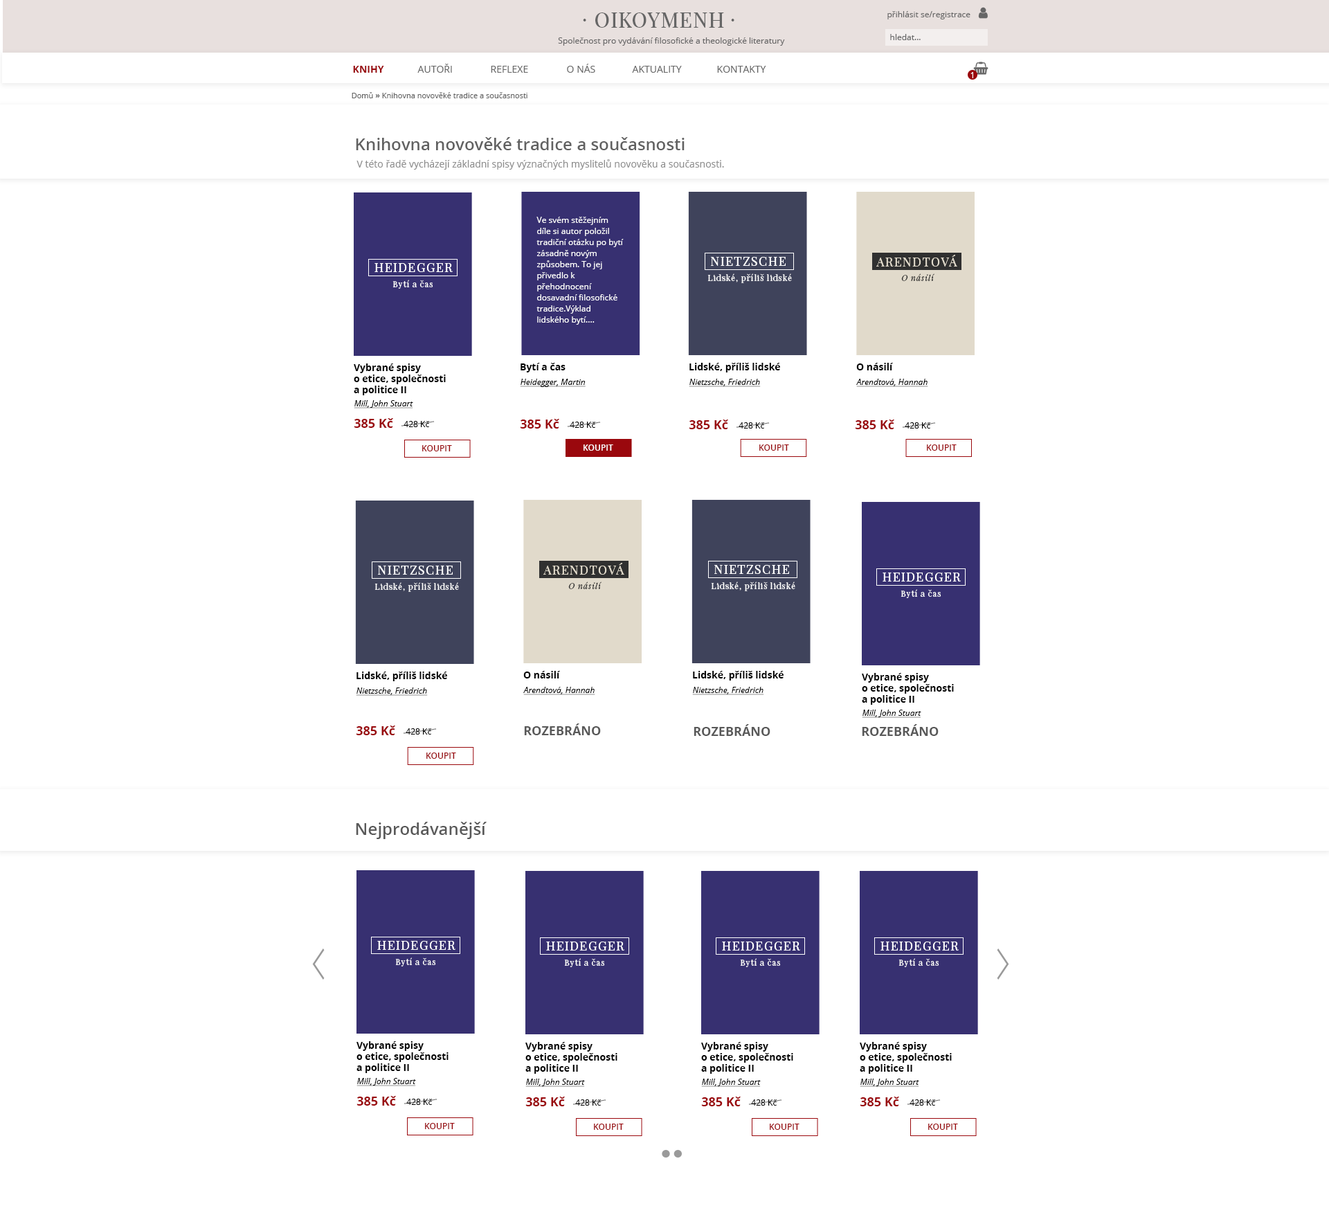
<style>
.page{position:relative;width:1329px;height:1215px;background:#ffffff}
.page>*{position:absolute;margin:0}
.t1{font:20.8px "PlayfairDisplay-Regular";letter-spacing:0.04em;color:#666666}
.t2{font:8.3px "OpenSans";color:#666666}
.t3{font:20.8px "PlayfairDisplaySC-Regular";letter-spacing:0.04em;color:#666666}
.t4{font:9.7px "OpenSans-Bold";color:#9a080d;text-transform:uppercase}
.t5{font:9.7px "OpenSans";color:#666666;text-transform:uppercase}
.t6{font:8.3px "OpenSans";color:#ffffff}
.t7{font:7.6px "OpenSans";color:#616161}
.t8{font:7.6px "OpenSans-Bold";color:#616161}
.t9{font:16.6px "OpenSans-Semibold";color:#616161}
.t10{font:9.7px "OpenSans";color:#8e8e8e}
.t11{font:8.3px/11.1px "OpenSans";color:#ffffff}
.t12{font:12.5px "PlayfairDisplay-Regular";letter-spacing:0.075em;color:#ffffff;text-transform:uppercase}
.t13{font:12.5px "PlayfairDisplay-Regular";letter-spacing:0.075em;color:#e1dacb;text-transform:uppercase}
.t14{font:8.3px "PlayfairDisplay-Regular";letter-spacing:0.075em;color:#ffffff}
.t15{font:8.3px "PlayfairDisplay-Italic";letter-spacing:0.075em;color:#303030}
.t16{font:9.7px/11.1px "OpenSans-Bold";color:#000000}
.t17{font:9.7px "OpenSans-Bold";color:#000000}
.t18{font:8.3px "OpenSans-Italic";color:#000000;text-decoration:underline}
.t19{font:12.5px "OpenSans-Bold";color:#9a080d}
.t20{font:8.3px "OpenSans";color:#000000}
.t21{font:8.3px "OpenSans-Semibold";color:#9a080d;text-transform:uppercase}
.t22{font:8.3px "OpenSans-Semibold";color:#ffffff;text-transform:uppercase}
.t23{font:12.5px "OpenSans-Bold";color:#595959}
.t24{font:16.6px "OpenSans-Semibold";color:#595959}
</style>
<div class="page">
<p class="t1" style="left:595px;top:12px;width:129px;height:16px">OIKOYMENH</p>
<p class="t2" style="left:888px;top:11px;width:83px;height:8px">přihlásit se/registrace</p>
<p class="t3" style="left:583px;top:19px;width:3px;height:2px">·</p>
<p class="t3" style="left:731px;top:19px;width:4px;height:2px">·</p>
<p class="t2" style="left:558px;top:37px;width:227px;height:9px">Společnost pro vydávání filosofické a theologické literatury</p>
<p class="t2" style="left:890px;top:34px;width:31px;height:6px">hledat...</p>
<p class="t4" style="left:353px;top:66px;width:31px;height:7px">Knihy</p>
<p class="t5" style="left:417px;top:64px;width:35px;height:9px">autoři</p>
<p class="t5" style="left:491px;top:66px;width:37px;height:7px">reflexe</p>
<p class="t5" style="left:567px;top:64px;width:28px;height:9px">o nás</p>
<p class="t5" style="left:632px;top:66px;width:50px;height:7px">Aktuality</p>
<p class="t5" style="left:717px;top:66px;width:49px;height:7px">kontakty</p>
<p class="t6" style="left:971px;top:72px;width:2px;height:6px">1</p>
<p class="t7" style="left:352px;top:92px;width:176px;height:6px">Domů <span class="t8">»</span> Knihovna novověké tradice a současnosti</p>
<p class="t9" style="left:356px;top:137px;width:329px;height:13px">Knihovna novověké tradice a současnosti</p>
<p class="t10" style="left:357px;top:159px;width:367px;height:11px">V této řadě vycházejí základní spisy význačných myslitelů novověku a současnosti.</p>
<p class="t11" style="left:537px;top:217px;width:87px;height:108px">Ve svém stěžejním díle si autor položil tradiční otázku po bytí zásadně novým způsobem. To jej přivedlo k přehodnocení dosavadní filosofické tradice.Výklad lidského bytí....</p>
<p class="t12" style="left:711px;top:257px;width:75px;height:9px">Nietzsche</p>
<p class="t13" style="left:876px;top:255px;width:81px;height:12px">Arendtová</p>
<p class="t12" style="left:375px;top:263px;width:78px;height:9px">Heidegger</p>
<p class="t14" style="left:393px;top:280px;width:40px;height:9px">Bytí a čas</p>
<p class="t14" style="left:708px;top:273px;width:84px;height:10px">Lidské, příliš lidské</p>
<p class="t15" style="left:901px;top:273px;width:34px;height:8px">O násilí</p>
<p class="t16" style="left:354px;top:363px;width:92px;height:32px">Vybrané spisy <br>o etice, společnosti <br>a politice II</p>
<p class="t17" style="left:521px;top:363px;width:45px;height:9px">Bytí a čas</p>
<p class="t17" style="left:690px;top:363px;width:90px;height:9px">Lidské, příliš lidské</p>
<p class="t17" style="left:856px;top:363px;width:38px;height:7px">O násilí</p>
<p class="t18" style="left:520px;top:379px;width:66px;height:8px">Heidegger, Martin</p>
<p class="t18" style="left:689px;top:379px;width:72px;height:8px">Nietzsche, Friedrich</p>
<p class="t18" style="left:856px;top:379px;width:72px;height:8px">Arendtová, Hannah</p>
<p class="t18" style="left:354px;top:400px;width:59px;height:8px">Mill, John Stuart</p>
<p class="t19" style="left:354px;top:418px;width:39px;height:10px">385 Kč</p>
<p class="t20" style="left:404px;top:421px;width:26px;height:6px">428 Kč</p>
<p class="t19" style="left:520px;top:419px;width:39px;height:10px">385 Kč</p>
<p class="t20" style="left:570px;top:422px;width:26px;height:6px">428 Kč</p>
<p class="t19" style="left:689px;top:420px;width:39px;height:9px">385 Kč</p>
<p class="t20" style="left:739px;top:422px;width:26px;height:7px">428 Kč</p>
<p class="t19" style="left:855px;top:420px;width:39px;height:9px">385 Kč</p>
<p class="t20" style="left:905px;top:422px;width:26px;height:7px">428 Kč</p>
<p class="t21" style="left:422px;top:445px;width:30px;height:6px">koupit</p>
<p class="t22" style="left:584px;top:444px;width:29px;height:7px">koupit</p>
<p class="t21" style="left:759px;top:444px;width:30px;height:7px">koupit</p>
<p class="t21" style="left:927px;top:444px;width:30px;height:7px">koupit</p>
<p class="t12" style="left:378px;top:566px;width:75px;height:9px">Nietzsche</p>
<p class="t13" style="left:543px;top:563px;width:81px;height:12px">Arendtová</p>
<p class="t12" style="left:714px;top:565px;width:75px;height:9px">Nietzsche</p>
<p class="t15" style="left:568px;top:582px;width:34px;height:7px">O násilí</p>
<p class="t14" style="left:711px;top:582px;width:84px;height:9px">Lidské, příliš lidské</p>
<p class="t12" style="left:883px;top:573px;width:78px;height:9px">Heidegger</p>
<p class="t14" style="left:375px;top:582px;width:84px;height:10px">Lidské, příliš lidské</p>
<p class="t14" style="left:901px;top:589px;width:41px;height:9px">Bytí a čas</p>
<p class="t17" style="left:357px;top:672px;width:90px;height:9px">Lidské, příliš lidské</p>
<p class="t17" style="left:523px;top:671px;width:38px;height:7px">O násilí</p>
<p class="t17" style="left:693px;top:671px;width:91px;height:10px">Lidské, příliš lidské</p>
<p class="t16" style="left:862px;top:673px;width:92px;height:32px">Vybrané spisy <br>o etice, společnosti <br>a politice II</p>
<p class="t18" style="left:356px;top:687px;width:72px;height:9px">Nietzsche, Friedrich</p>
<p class="t18" style="left:523px;top:687px;width:72px;height:8px">Arendtová, Hannah</p>
<p class="t18" style="left:692px;top:687px;width:72px;height:8px">Nietzsche, Friedrich</p>
<p class="t18" style="left:862px;top:710px;width:59px;height:8px">Mill, John Stuart</p>
<p class="t19" style="left:356px;top:726px;width:39px;height:9px">385 Kč</p>
<p class="t23" style="left:524px;top:723px;width:77px;height:12px">ROZEBRÁNO</p>
<p class="t23" style="left:694px;top:724px;width:77px;height:12px">ROZEBRÁNO</p>
<p class="t23" style="left:862px;top:724px;width:77px;height:12px">ROZEBRÁNO</p>
<p class="t20" style="left:406px;top:728px;width:26px;height:7px">428 Kč</p>
<p class="t21" style="left:426px;top:753px;width:30px;height:6px">koupit</p>
<p class="t24" style="left:356px;top:822px;width:131px;height:17px">Nejprodávanější</p>
<p class="t12" style="left:377px;top:941px;width:79px;height:9px">Heidegger</p>
<p class="t12" style="left:546px;top:942px;width:78px;height:9px">Heidegger</p>
<p class="t12" style="left:722px;top:942px;width:78px;height:9px">Heidegger</p>
<p class="t12" style="left:881px;top:942px;width:78px;height:9px">Heidegger</p>
<p class="t14" style="left:395px;top:957px;width:41px;height:9px">Bytí a čas</p>
<p class="t14" style="left:564px;top:958px;width:41px;height:9px">Bytí a čas</p>
<p class="t14" style="left:740px;top:958px;width:41px;height:9px">Bytí a čas</p>
<p class="t14" style="left:899px;top:958px;width:40px;height:9px">Bytí a čas</p>
<p class="t16" style="left:357px;top:1041px;width:92px;height:32px">Vybrané spisy <br>o etice, společnosti <br>a politice II</p>
<p class="t16" style="left:525px;top:1042px;width:93px;height:32px">Vybrané spisy <br>o etice, společnosti <br>a politice II</p>
<p class="t16" style="left:701px;top:1042px;width:92px;height:32px">Vybrané spisy <br>o etice, společnosti <br>a politice II</p>
<p class="t16" style="left:860px;top:1042px;width:92px;height:32px">Vybrané spisy <br>o etice, společnosti <br>a politice II</p>
<p class="t18" style="left:357px;top:1078px;width:59px;height:8px">Mill, John Stuart</p>
<p class="t18" style="left:525px;top:1079px;width:60px;height:8px">Mill, John Stuart</p>
<p class="t18" style="left:701px;top:1079px;width:60px;height:8px">Mill, John Stuart</p>
<p class="t18" style="left:860px;top:1079px;width:59px;height:8px">Mill, John Stuart</p>
<p class="t19" style="left:357px;top:1096px;width:39px;height:10px">385 Kč</p>
<p class="t19" style="left:525px;top:1097px;width:40px;height:9px">385 Kč</p>
<p class="t19" style="left:701px;top:1097px;width:40px;height:9px">385 Kč</p>
<p class="t19" style="left:860px;top:1097px;width:39px;height:9px">385 Kč</p>
<p class="t20" style="left:406px;top:1099px;width:27px;height:6px">428 Kč</p>
<p class="t20" style="left:575px;top:1099px;width:27px;height:7px">428 Kč</p>
<p class="t20" style="left:751px;top:1099px;width:26px;height:7px">428 Kč</p>
<p class="t20" style="left:910px;top:1099px;width:26px;height:7px">428 Kč</p>
<p class="t21" style="left:425px;top:1123px;width:30px;height:6px">koupit</p>
<p class="t21" style="left:594px;top:1124px;width:30px;height:6px">koupit</p>
<p class="t21" style="left:770px;top:1124px;width:30px;height:6px">koupit</p>
<p class="t21" style="left:928px;top:1124px;width:30px;height:6px">koupit</p>
</div>
